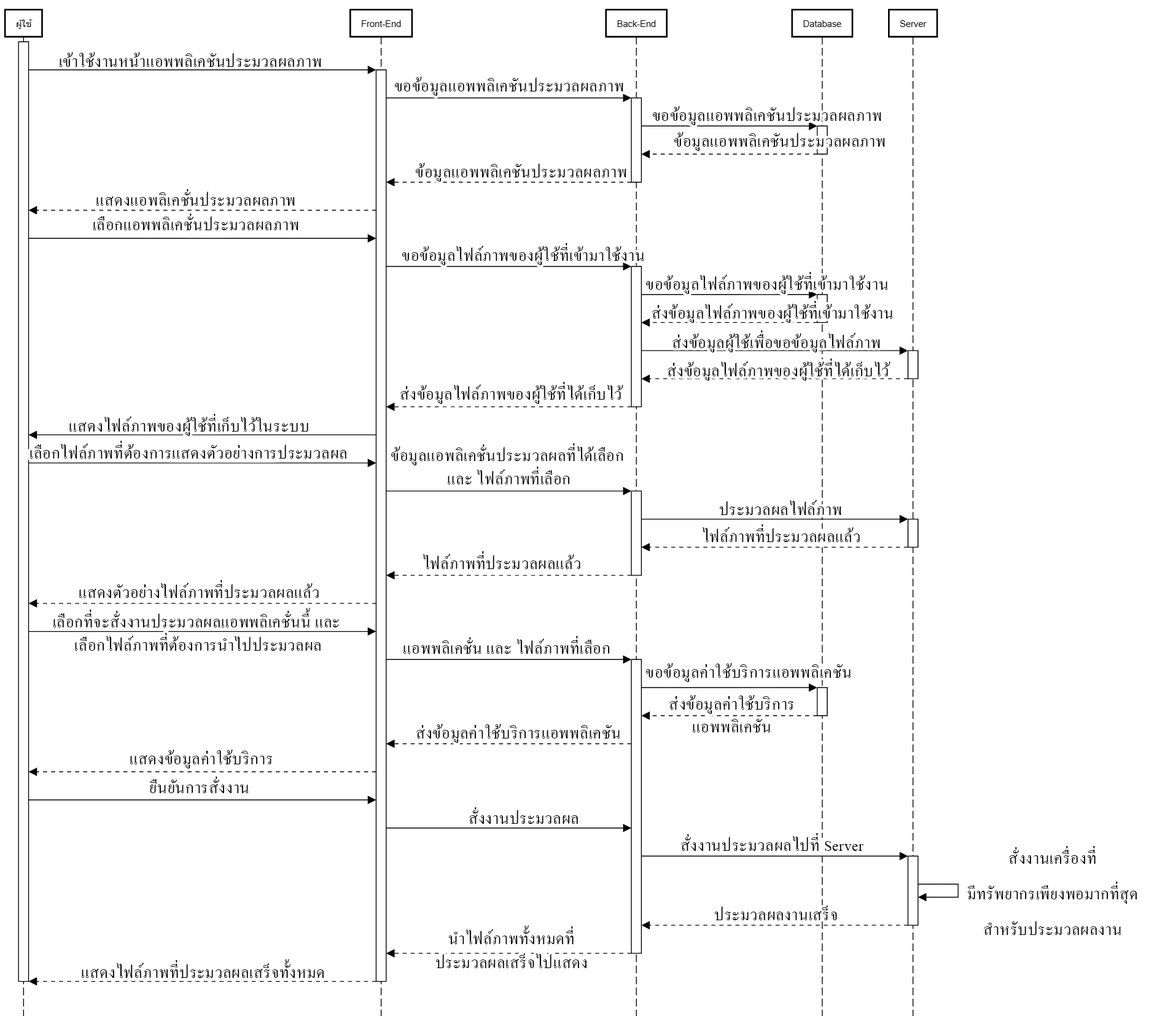
<style>
.page{position:relative;width:1173px;height:1016px;background:#ffffff}
.page>*{position:absolute;margin:0}
.t1{font:21.5px "AngsanaNew";letter-spacing:0.02em;color:#000000}
.t2{font:21.5px/23.3px "AngsanaNew";letter-spacing:0.02em;color:#000000}
.t3{font:21.5px/22.7px "AngsanaNew";letter-spacing:0.02em;color:#000000}
.t4{font:21.5px/35.4px "AngsanaNew";letter-spacing:0.02em;color:#000000}
.t5{font:21.5px/24px "AngsanaNew";letter-spacing:0.02em;color:#000000}
</style>
<div class="page">
<p class="t1" style="left:60px;top:52px;width:261px;height:15px">เข้าใช้งานหน้าแอพพลิเคชันประมวลผลภาพ</p>
<p class="t1" style="left:394px;top:77px;width:229px;height:19px">ขอข้อมูลแอพพลิเคชันประมวลผลภาพ</p>
<p class="t1" style="left:652px;top:106px;width:229px;height:19px">ขอข้อมูลแอพพลิเคชันประมวลผลภาพ</p>
<p class="t1" style="left:674px;top:132px;width:211px;height:19px">ข้อมูลแอพพลิเคชันประมวลผลภาพ</p>
<p class="t1" style="left:415px;top:163px;width:211px;height:19px">ข้อมูลแอพพลิเคชันประมวลผลภาพ</p>
<p class="t1" style="left:96px;top:189px;width:199px;height:17px">แสดงแอพลิเคชั่นประมวลผลภาพ</p>
<p class="t1" style="left:93px;top:214px;width:205px;height:16px">เลือกแอพพลิเคชั่นประมวลผลภาพ</p>
<p class="t1" style="left:402px;top:243px;width:242px;height:22px">ขอข้อมูลไฟล์ภาพของผู้ใช้ที่เข้ามาใช้งาน</p>
<p class="t1" style="left:646px;top:272px;width:242px;height:22px">ขอข้อมูลไฟล์ภาพของผู้ใช้ที่เข้ามาใช้งาน</p>
<p class="t1" style="left:652px;top:301px;width:241px;height:22px">ส่งข้อมูลไฟล์ภาพของผู้ใช้ที่เข้ามาใช้งาน</p>
<p class="t1" style="left:673px;top:330px;width:207px;height:23px">ส่งข้อมูลผู้ใช้เพื่อขอข้อมูลไฟล์ภาพ</p>
<p class="t1" style="left:668px;top:359px;width:223px;height:22px">ส่งข้อมูลไฟล์ภาพของผู้ใช้ที่ได้เก็บไว้</p>
<p class="t1" style="left:400px;top:382px;width:223px;height:22px">ส่งข้อมูลไฟล์ภาพของผู้ใช้ที่ได้เก็บไว้</p>
<p class="t1" style="left:69px;top:414px;width:239px;height:22px">แสดงไฟล์ภาพของผู้ใช้ที่เก็บไว้ในระบบ</p>
<p class="t1" style="left:30px;top:441px;width:316px;height:18px">เลือกไฟล์ภาพที่ต้องการแสดงตัวอย่างการประมวลผล</p>
<p class="t2" style="left:391px;top:443px;width:232px;height:42px;text-align:center">ข้อมูลแอพลิเคชั่นประมวลผลที่ได้เลือก <br>และ ไฟล์ภาพที่เลือก</p>
<p class="t1" style="left:720px;top:500px;width:121px;height:15px">ประมวลผลไฟล์ภาพ</p>
<p class="t1" style="left:703px;top:525px;width:157px;height:17px">ไฟล์ภาพที่ประมวลผลแล้ว</p>
<p class="t1" style="left:423px;top:552px;width:157px;height:17px">ไฟล์ภาพที่ประมวลผลแล้ว</p>
<p class="t1" style="left:79px;top:580px;width:240px;height:18px">แสดงตัวอย่างไฟล์ภาพที่ประมวลผลแล้ว</p>
<p class="t2" style="left:53px;top:608px;width:286px;height:43px;text-align:center">เลือกที่จะสั่งงานประมวลผลแอพพลิเคชั่นนี้ และ <br>เลือกไฟล์ภาพที่ต้องการนำไปประมวลผล</p>
<p class="t1" style="left:404px;top:636px;width:206px;height:18px">แอพพลิเคชั่น และ ไฟล์ภาพที่เลือก</p>
<p class="t1" style="left:646px;top:663px;width:205px;height:19px">ขอข้อมูลค่าใช้บริการแอพพลิเคชัน</p>
<p class="t3" style="left:669px;top:695px;width:125px;height:38px;text-align:center">ส่งข้อมูลค่าใช้บริการ<br>แอพพลิเคชัน</p>
<p class="t1" style="left:416px;top:724px;width:204px;height:19px">ส่งข้อมูลค่าใช้บริการแอพพลิเคชัน</p>
<p class="t1" style="left:130px;top:750px;width:142px;height:19px">แสดงข้อมูลค่าใช้บริการ</p>
<p class="t1" style="left:150px;top:777px;width:99px;height:17px">ยืนยันการสั่งงาน</p>
<p class="t1" style="left:469px;top:808px;width:109px;height:16px">สั่งงานประมวลผล</p>
<p class="t1" style="left:681px;top:833px;width:183px;height:18px">สั่งงานประมวลผลไปที่ Server</p>
<p class="t4" style="left:967px;top:846px;width:170px;height:89px;text-align:center">สั่งงานเครื่องที่<br>มีทรัพยากรเพียงพอมากที่สุด<br>สำหรับประมวลผลงาน</p>
<p class="t1" style="left:715px;top:906px;width:122px;height:15px">ประมวลผลงานเสร็จ</p>
<p class="t5" style="left:436px;top:926px;width:151px;height:43px;text-align:center">นำไฟล์ภาพทั้งหมดที่<br>ประมวลผลเสร็จไปแสดง</p>
<p class="t1" style="left:82px;top:959px;width:242px;height:19px">แสดงไฟล์ภาพที่ประมวลผลเสร็จทั้งหมด</p>
</div>
